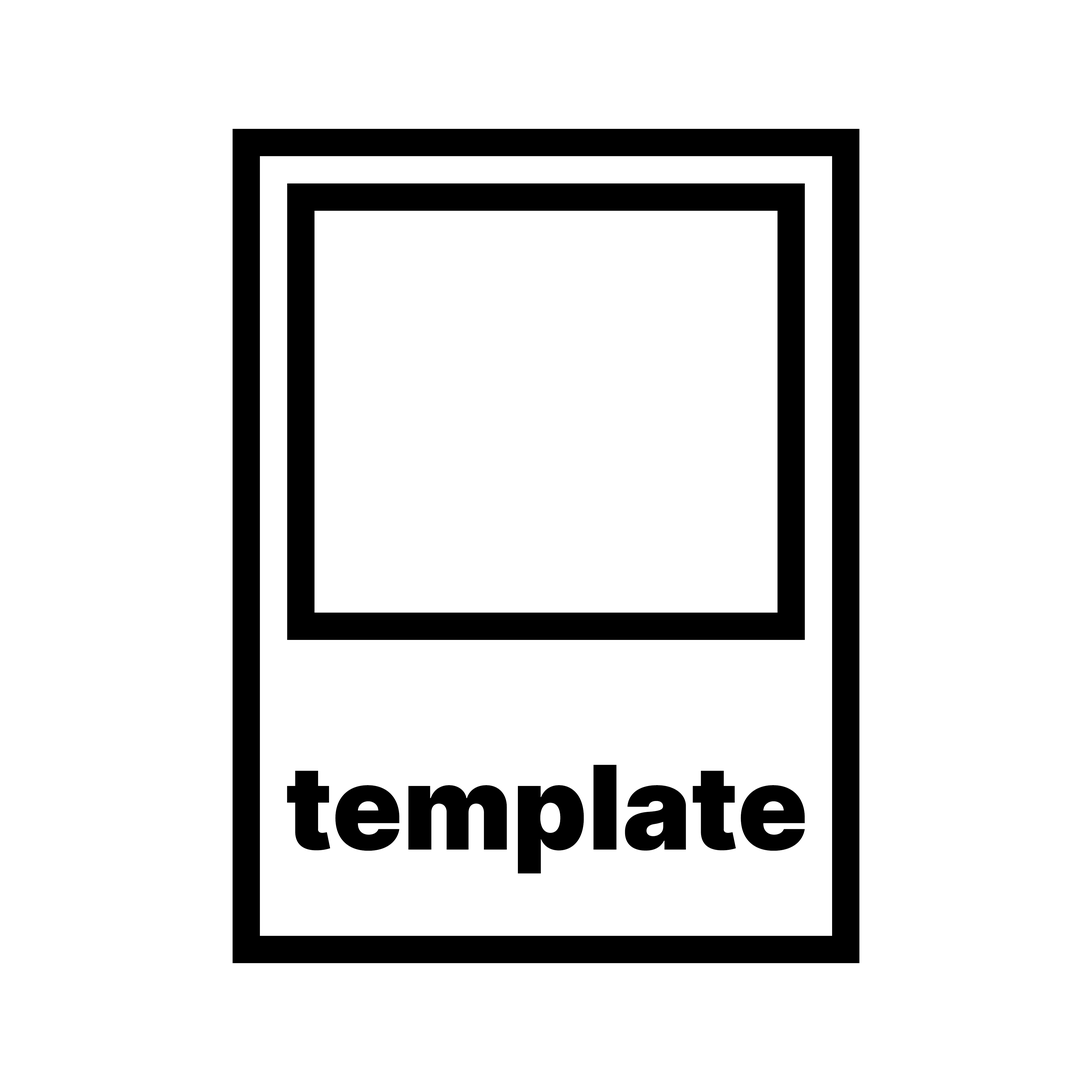
<style>
.page{position:relative;width:1092px;height:1092px;background:#ffffff}
.page>*{position:absolute;margin:0}
.t1{font:116.5px "InterUI-Black";color:#000000}
</style>
<div class="page">
<p class="t1" style="left:287px;top:765px;width:518px;height:109px">template</p>
</div>
